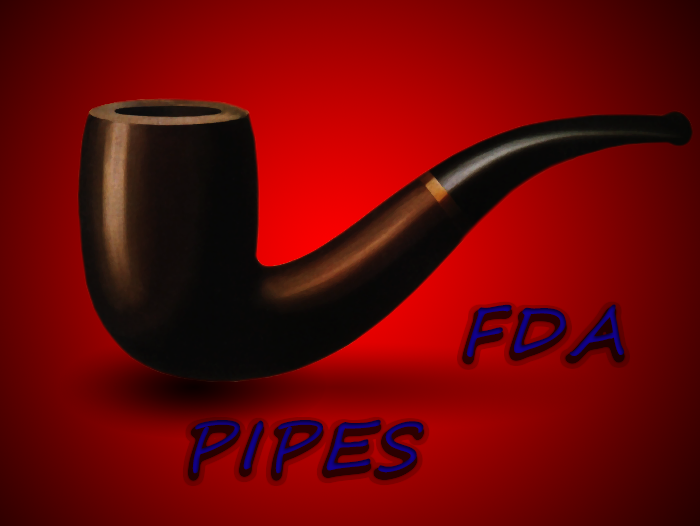
<style>
.page{position:relative;width:700px;height:526px}
.page>*{position:absolute;margin:0}
.t1{font:96px "SegoeScript";letter-spacing:0.075em;color:#0f0079;font-variant:small-caps;font-style:italic}
</style>
<div class="page">
<p class="t1" style="left:192px;top:304px;width:433px;height:170px;text-align:center">fda<br>pipes</p>
</div>
